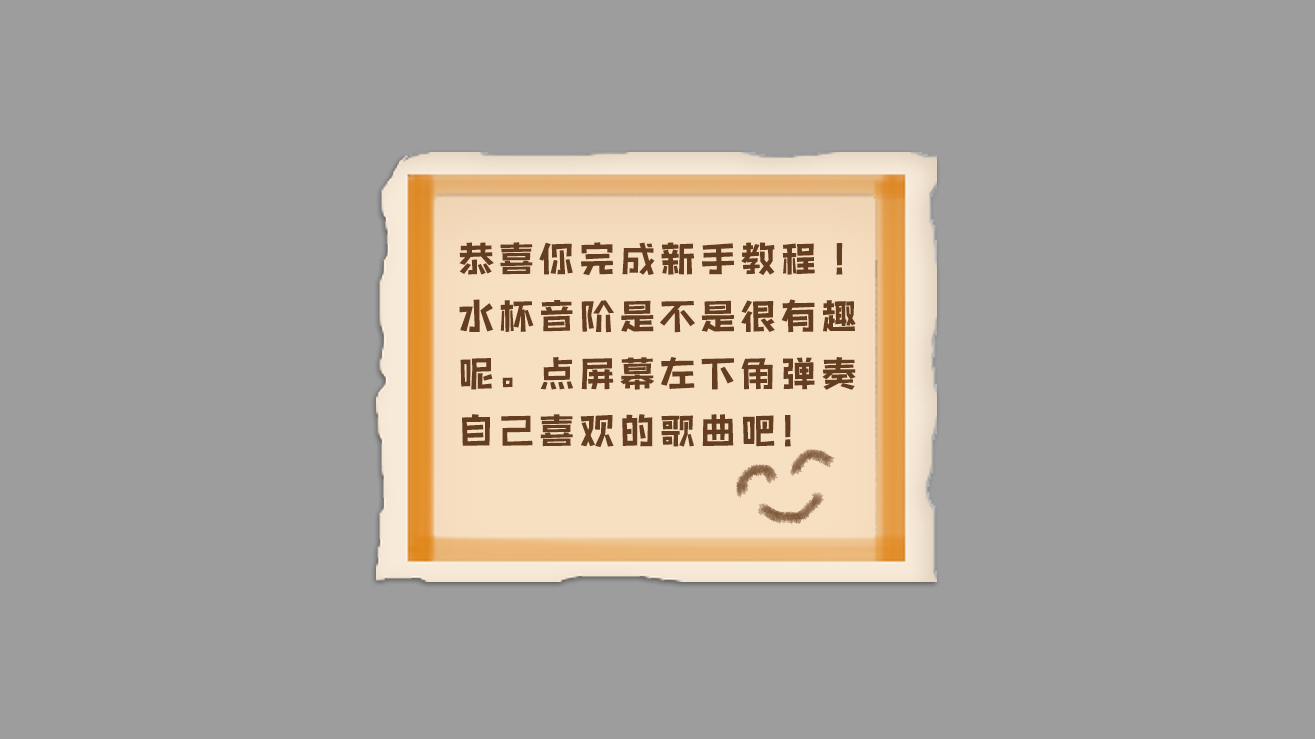
<style>
.page{position:relative;width:1315px;height:739px;background:#9d9d9d}
.page>*{position:absolute;margin:0}
.t1{font:36px/57.3px "BenmoJianzi";letter-spacing:0.12em;color:#653e1f}
</style>
<div class="page">
<p class="t1" style="left:459px;top:242px;width:397px;height:206px">恭喜你完成新手教程！<br>水杯音阶是不是很有趣呢。点屏幕左下角弹奏自己喜欢的歌曲吧!</p>
</div>
